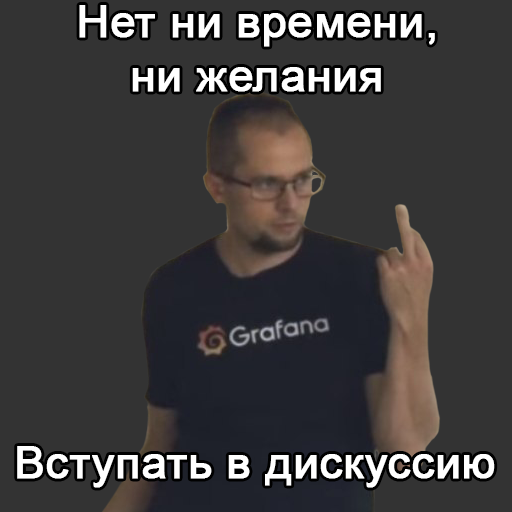
<style>
.page{position:relative;width:512px;height:512px;background:#333333}
.page>*{position:absolute;margin:0}
.t1{font:45px "ArialMT";color:#ffffff;font-weight:bold}
</style>
<div class="page">
<p class="t1" style="left:79px;top:5px;width:356px;height:87px;text-align:center">Нет ни времени,<br>ни желания</p>
<p class="t1" style="left:17px;top:446px;width:478px;height:42px">Вступать в дискуссию</p>
</div>
